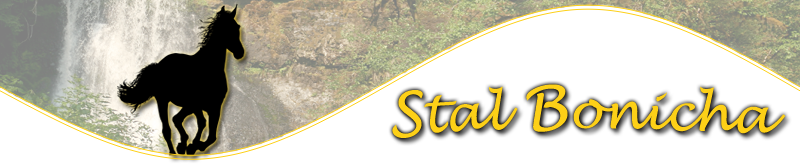
<style>
.page{position:relative;width:800px;height:165px;background:#ffffff}
.page>*{position:absolute;margin:0}
.t1{font:50px "LucidaHandwriting-Italic";color:#fdd017}
.t2{font:60px "LucidaHandwriting-Italic";color:#fdd017}
</style>
<div class="page">
<p class="t1" style="left:392px;top:84px;width:394px;height:54px"><span class="t2">S</span>tal <span class="t2">B</span>onicha</p>
</div>
